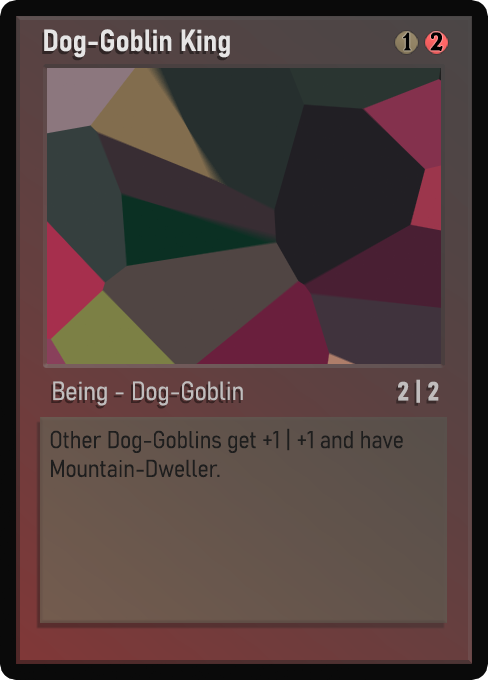
<style>
.page{position:relative;width:488px;height:680px}
.page>*{position:absolute;margin:0}
.t1{font:30px "Bahnschrift-SemiBoldSemiCondensed";color:#f2f2f2;font-weight:bold}
.t2{font:25px "WTRRoycroft";color:#000000;font-weight:bold;scale:1.09 1}
.t3{font:26px "Bahnschrift-LightSemiCondensed";color:#c8c8c8;font-weight:bold}
.t4{font:26px "Bahnschrift-BoldSemiCondensed";color:#c1bdbd;font-weight:bold}
.t5{font:24px "Bahnschrift-LightSemiCondensed";color:#1e1e1e;font-weight:bold}
</style>
<div class="page">
<p class="t1" style="left:44px;top:29px;width:186px;height:29px;opacity:0.9">Dog-Goblin King</p>
<p class="t2" style="left:403px;top:32px;width:8px;height:19px">1</p>
<p class="t2" style="left:430px;top:32px;width:13px;height:19px">2</p>
<p class="t3" style="left:53px;top:381px;width:190px;height:25px;opacity:0.9">Being - Dog-Goblin</p>
<p class="t4" style="left:398px;top:379px;width:41px;height:24px">2 | 2</p>
<p class="t5" style="left:50px;top:428px;width:353px;height:50px">Other Dog-Goblins get +1 | +1 and have Mountain-Dweller.</p>
</div>
